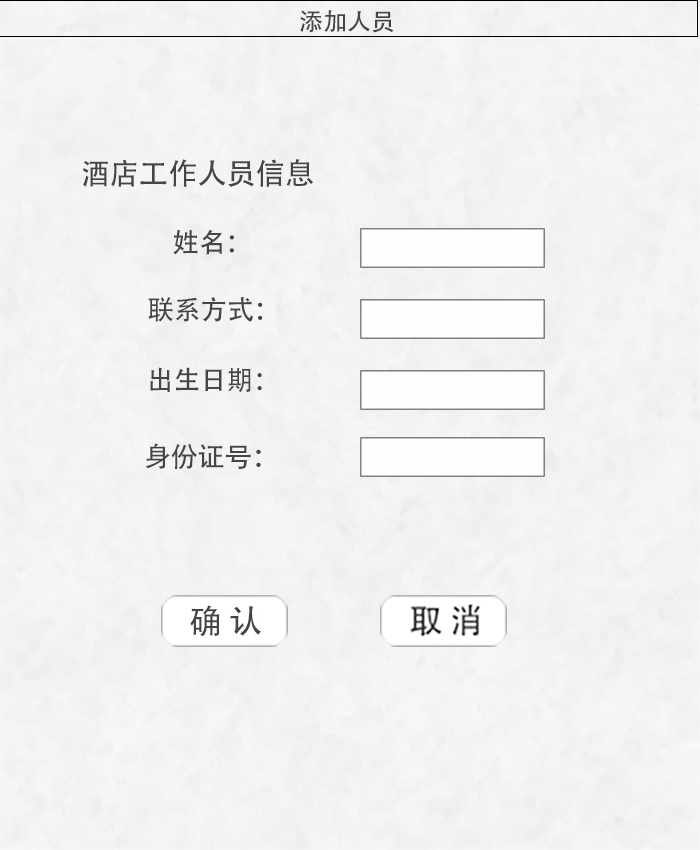
<style>
.page{position:relative;width:700px;height:850px}
.page>*{position:absolute;margin:0}
.t1{font:24px "AdobeHeitiStd-Regular";letter-spacing:-0.005em;color:#474444;text-transform:uppercase}
.t2{font:29.7px "AdobeHeitiStd-Regular";letter-spacing:-0.005em;color:#474444;text-transform:uppercase}
.t3{font:27px "AdobeHeitiStd-Regular";letter-spacing:-0.005em;color:#474444;text-transform:uppercase}
</style>
<div class="page">
<p class="t1" style="left:300px;top:10px;width:94px;height:23px">添加人员</p>
<p class="t2" style="left:82px;top:159px;width:231px;height:28px">酒店工作人员信息</p>
<p class="t3" style="left:173px;top:229px;width:61px;height:26px">姓名：</p>
<p class="t3" style="left:148px;top:297px;width:115px;height:25px">联系方式：</p>
<p class="t3" style="left:150px;top:367px;width:112px;height:26px">出生日期：</p>
<p class="t3" style="left:145px;top:443px;width:116px;height:27px">身份证号：</p>
</div>
